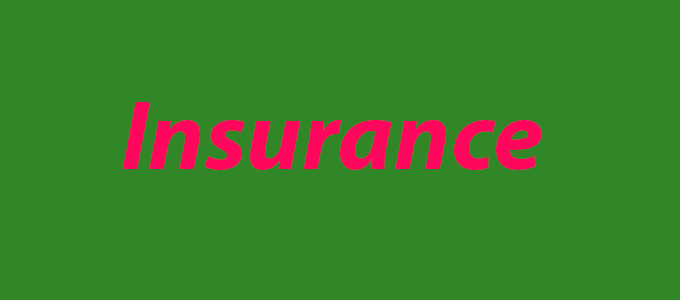
<style>
.page{position:relative;width:680px;height:300px;background:#318727}
.page>*{position:absolute;margin:0}
.t1{font:100px "MyriadPro-BoldIt";color:#fd075d}
</style>
<div class="page">
<p class="t1" style="left:122px;top:102px;width:420px;height:68px">Insurance</p>
</div>
